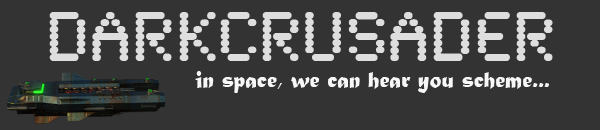
<style>
.page{position:relative;width:600px;height:130px;background:#333333}
.page>*{position:absolute;margin:0}
.t1{font:71.1px "SynchroLET";color:#dedede}
.t2{font:23.7px "MaturaMTScriptCapitals";color:#f7f7f7}
</style>
<div class="page">
<p class="t1" style="left:49px;top:12px;width:504px;height:49px">DarkCrusader</p>
<p class="t2" style="left:195px;top:71px;width:354px;height:22px">in space, we can hear you scheme...</p>
</div>
